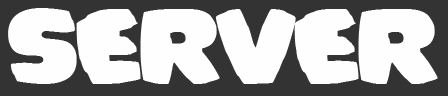
<style>
.page{position:relative;width:448px;height:96px;background:#fefefe}
.page>*{position:absolute;margin:0}
.t1{font:100px "Bomberman";color:#fefefe}
</style>
<div class="page">
<p class="t1" style="left:8px;top:8px;width:430px;height:76px">Server</p>
</div>
